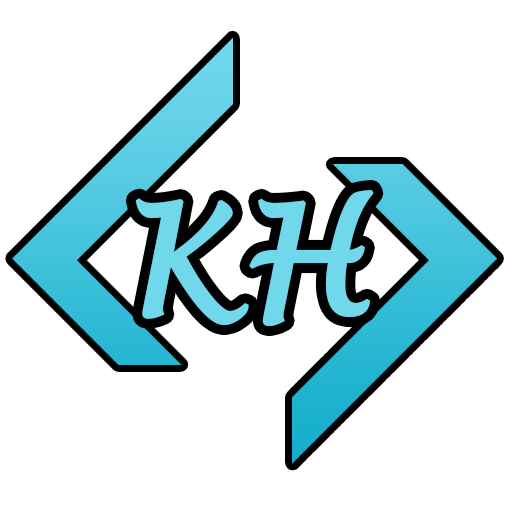
<style>
.page{position:relative;width:512px;height:512px;background:#ffffff}
.page>*{position:absolute;margin:0}
.t1{font:150px "LucidaHandwriting-Italic";color:#71d7eb;font-weight:bold}
</style>
<div class="page">
<p class="t1" style="left:135px;top:189px;width:239px;height:138px">KH</p>
</div>
